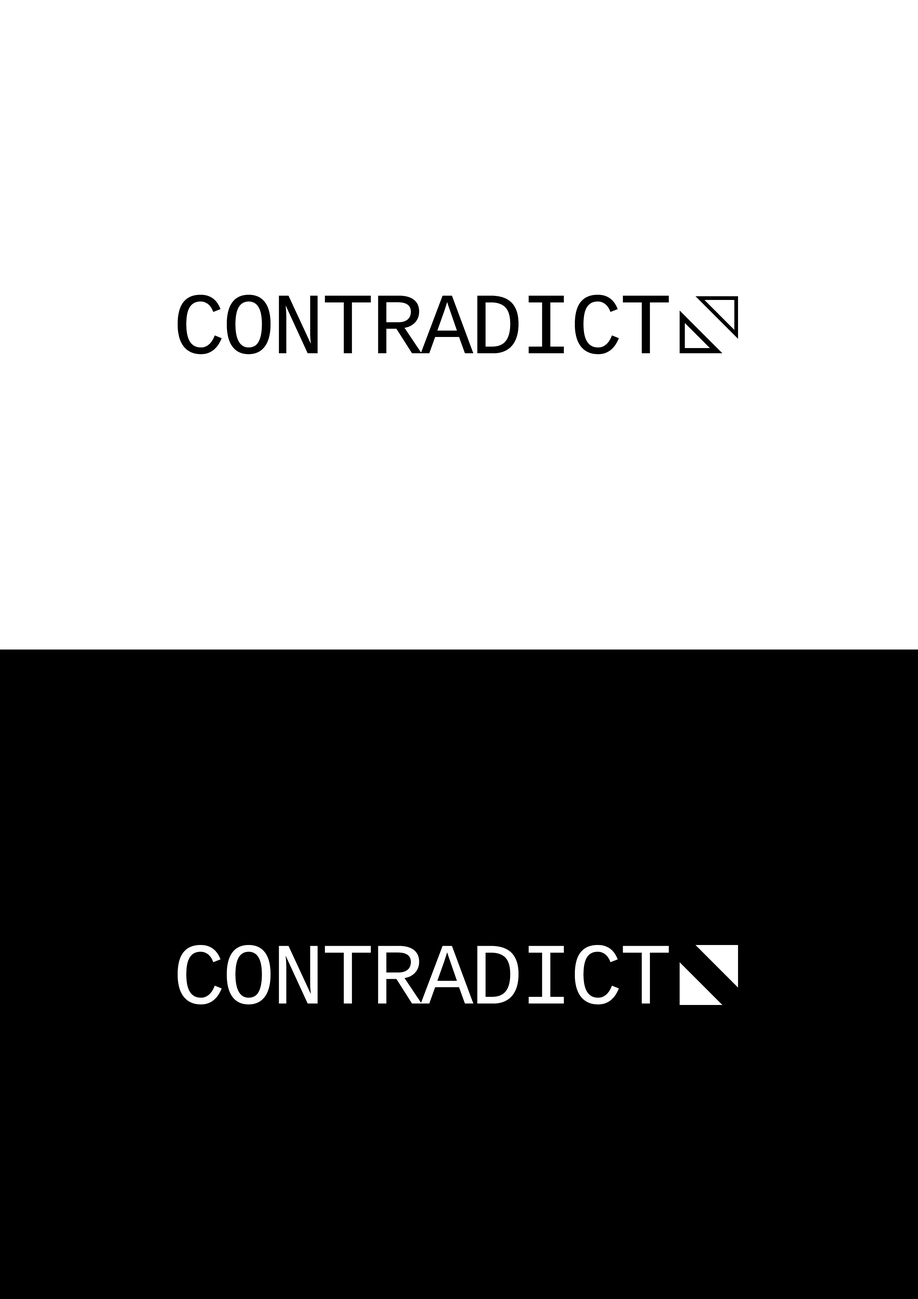
<style>
.page{position:relative;width:918px;height:1299px;background:#ffffff}
.page>*{position:absolute;margin:0}
.t1{font:87.4px "LiberationMono";letter-spacing:-0.032em;color:#000000;text-transform:uppercase}
.t2{font:87.4px "LiberationMono";letter-spacing:-0.032em;color:#ffffff;text-transform:uppercase}
</style>
<div class="page">
<p class="t1" style="left:178px;top:295px;width:491px;height:59px">CONTRADICt</p>
<p class="t2" style="left:178px;top:945px;width:491px;height:59px">CONTRADICt</p>
</div>
